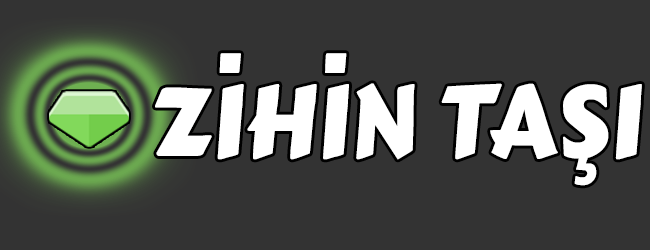
<style>
.page{position:relative;width:650px;height:250px;background:#333333}
.page>*{position:absolute;margin:0}
.t1{font:100px "CarterOne";color:#ffffff}
</style>
<div class="page">
<p class="t1" style="left:155px;top:53px;width:487px;height:133px">ZİHİN TAŞI</p>
</div>
